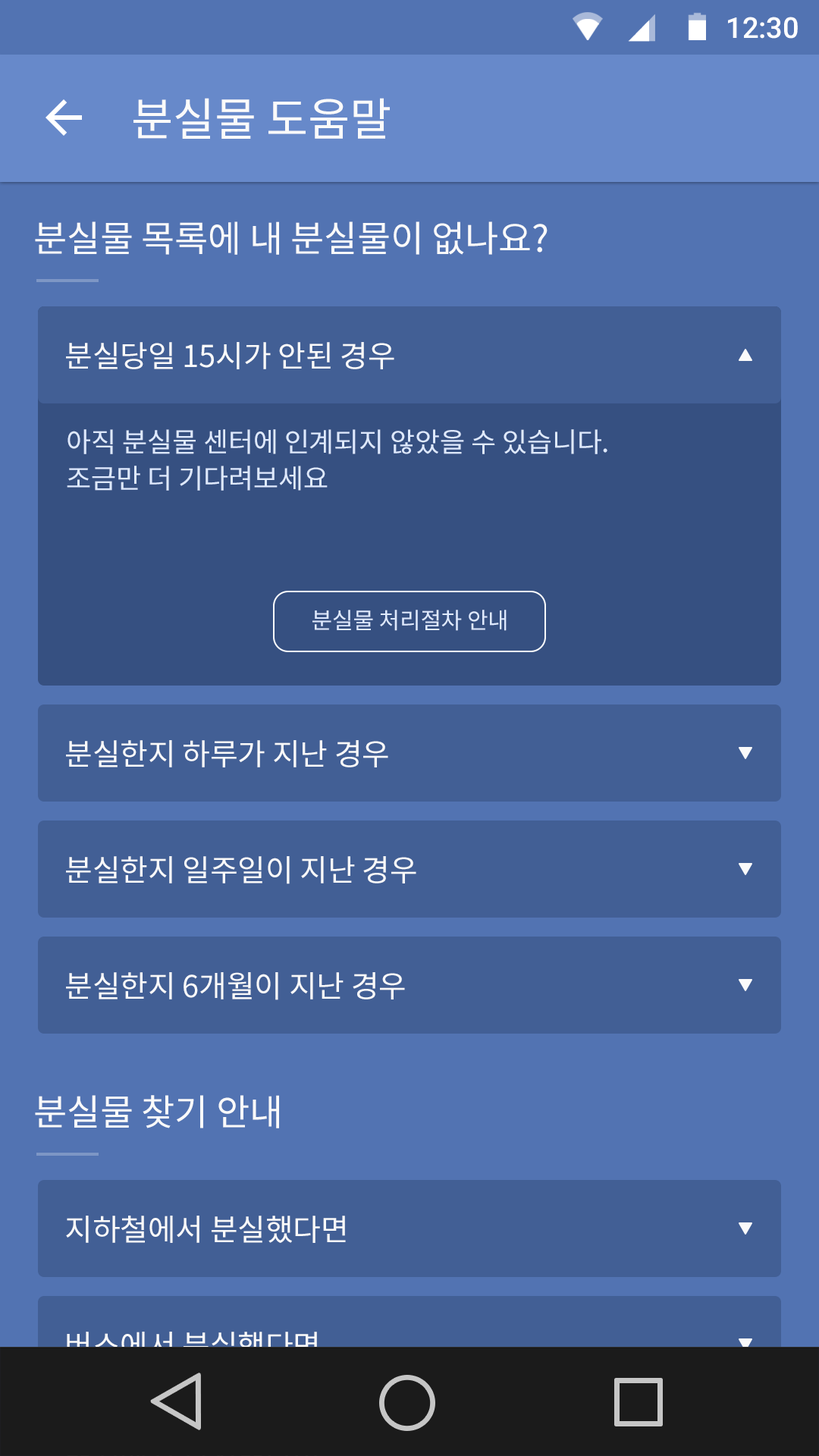
<style>
.page{position:relative;width:819px;height:1456px;background:#5273b2}
.page>*{position:absolute;margin:0}
.t1{font:28.8px "Roboto-Medium";color:#ffffff}
.t2{font:45.5px "NotoSansCJKkr-Regular";letter-spacing:-0.005em;color:#fafafa}
.t3{font:36.4px "NotoSansCJKkr-Regular";letter-spacing:-0.005em;color:#fafafa}
.t4{font:30.3px "NotoSansCJKkr-Regular";letter-spacing:-0.005em;color:#fafafa}
.t5{font:27.3px/36.4px "NotoSansCJKkr-Regular";letter-spacing:-0.005em;color:#dee9ff}
.t6{font:22.7px "NotoSansCJKkr-Regular";letter-spacing:-0.005em;color:#dee9ff}
</style>
<div class="page">
<p class="t1" style="left:728px;top:17px;width:70px;height:22px">12:30</p>
<p class="t2" style="left:133px;top:98px;width:257px;height:41px">분실물 도움말</p>
<p class="t3" style="left:35px;top:221px;width:513px;height:34px">분실물 목록에 내 분실물이 없나요?</p>
<p class="t4" style="left:66px;top:342px;width:328px;height:27px">분실당일 15시가 안된 경우</p>
<p class="t5" style="left:67px;top:429px;width:540px;height:62px">아직 분실물 센터에 인계되지 않았을 수 있습니다. <br>조금만 더 기다려보세요</p>
<p class="t6" style="left:312px;top:610px;width:195px;height:21px">분실물 처리절차 안내</p>
<p class="t4" style="left:66px;top:740px;width:322px;height:27px">분실한지 하루가 지난 경우</p>
<p class="t4" style="left:66px;top:856px;width:350px;height:28px">분실한지 일주일이 지난 경우</p>
<p class="t4" style="left:66px;top:972px;width:339px;height:28px">분실한지 6개월이 지난 경우</p>
<p class="t3" style="left:35px;top:1095px;width:244px;height:33px">분실물 찾기 안내</p>
<p class="t4" style="left:66px;top:1216px;width:280px;height:27px">지하철에서 분실했다면</p>
<p class="t4" style="left:67px;top:1332px;width:251px;height:27px">버스에서 분실했다면</p>
</div>
